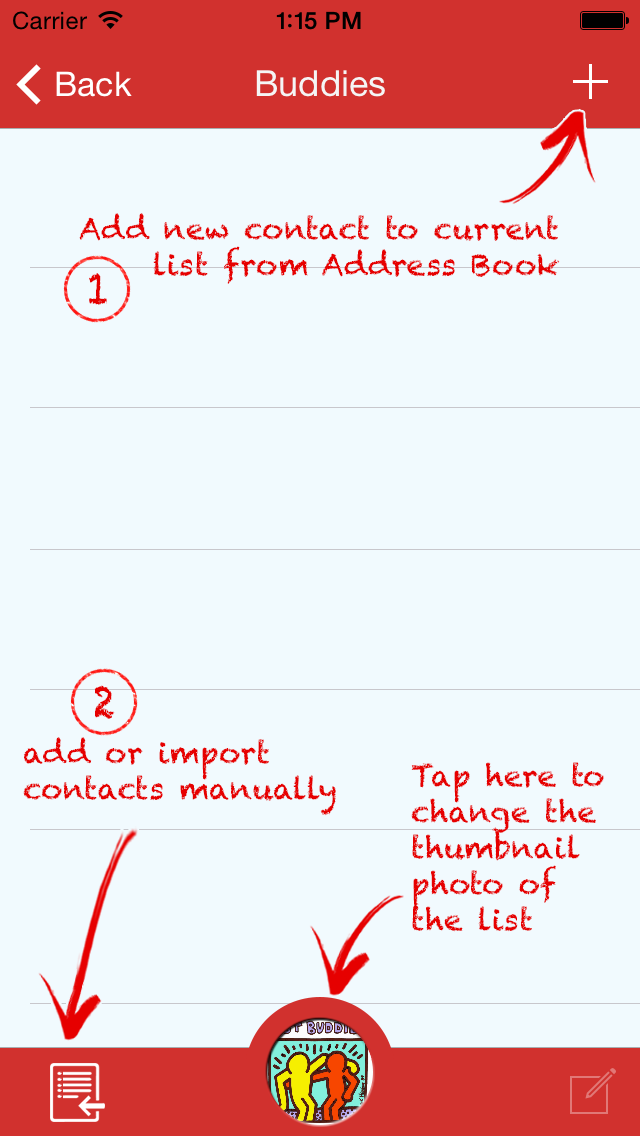
<style>
.page{position:relative;width:640px;height:1136px;background:#f1fafe}
.page>*{position:absolute;margin:0}
.t1{font:30px "Chalkduster";color:#e60000}
.t2{font:44.2px "Chalkduster";color:#e60000;scale:0.9 1}
</style>
<div class="page">
<p class="t1" style="left:79px;top:213px;width:481px;height:71px">Add new contact to current list from Address Book</p>
<p class="t2" style="left:89px;top:273px;width:18px;height:32px">1</p>
<p class="t2" style="left:94px;top:685px;width:21px;height:34px">2</p>
<p class="t1" style="left:23px;top:737px;width:313px;height:79px;text-align:right">add or import contacts manually</p>
<p class="t1" style="left:411px;top:762px;width:193px;height:170px;text-align:right">Tap here to change the thumbnail photo of <br>the list</p>
</div>
